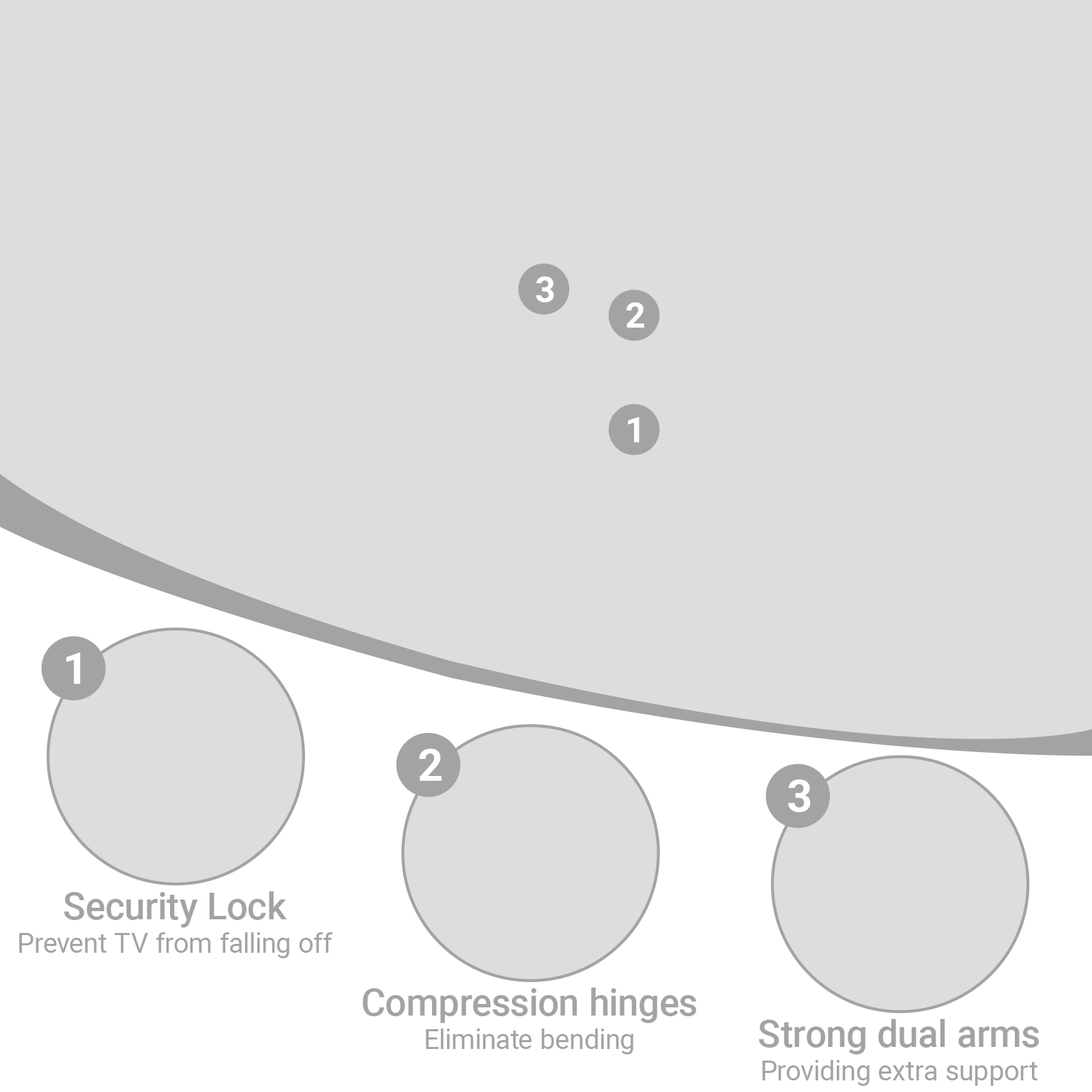
<style>
.page{position:relative;width:1092px;height:1092px;background:#dcdddf}
.page>*{position:absolute;margin:0}
.t1{font:35.3px "Roboto-Bold";color:#ffffff}
.t2{font:44.4px "Roboto-Bold";color:#ffffff}
.t3{font:37.6px "Roboto-Medium";color:#a3a3a3}
.t4{font:27.4px "Roboto-Regular";color:#a3a3a3}
</style>
<div class="page">
<p class="t1" style="left:536px;top:276px;width:18px;height:26px">3</p>
<p class="t1" style="left:626px;top:302px;width:18px;height:26px">2</p>
<p class="t1" style="left:628px;top:417px;width:11px;height:25px">1</p>
<p class="t2" style="left:66px;top:652px;width:15px;height:32px">1</p>
<p class="t2" style="left:419px;top:749px;width:23px;height:32px">2</p>
<p class="t2" style="left:788px;top:779px;width:23px;height:33px">3</p>
<p class="t3" style="left:64px;top:891px;width:223px;height:37px">Security Lock</p>
<p class="t4" style="left:19px;top:932px;width:313px;height:26px">Prevent TV from falling off</p>
<p class="t3" style="left:362px;top:988px;width:334px;height:35px">Compression hinges</p>
<p class="t3" style="left:759px;top:1019px;width:280px;height:35px">Strong dual arms</p>
<p class="t4" style="left:426px;top:1029px;width:207px;height:25px">Eliminate bending</p>
<p class="t4" style="left:762px;top:1060px;width:275px;height:26px">Providing extra support</p>
</div>
